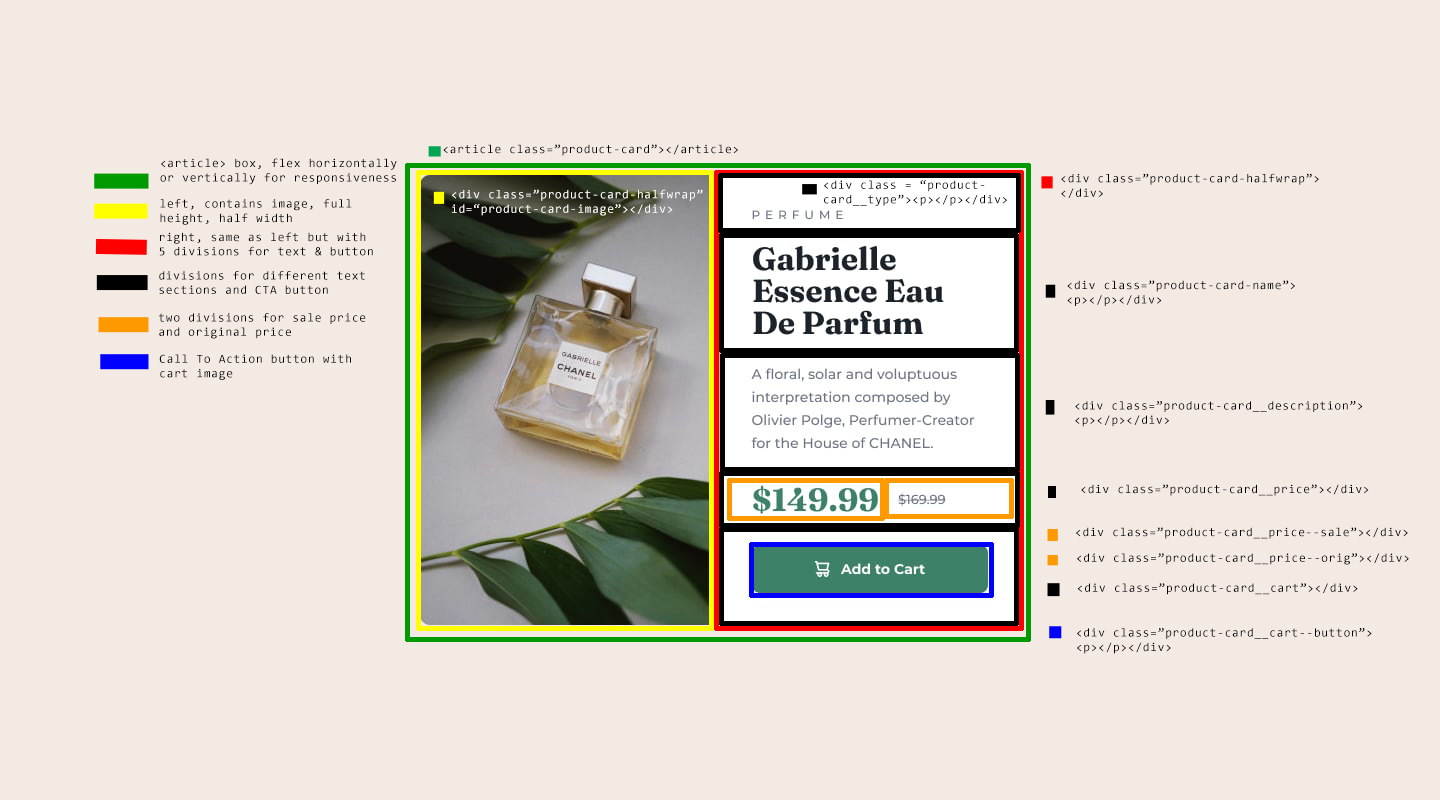
<style>
.page{position:relative;width:1440px;height:800px;background:#f3eae3}
.page>*{position:absolute;margin:0}
.t1{font:12px "Consolas";letter-spacing:0.07em;color:#000000}
.t2{font:12px "Consolas";letter-spacing:0.07em;color:#ffffff}
</style>
<div class="page">
<p class="t1" style="left:443px;top:144px;width:295px;height:12px">&lt;article class=”product-card”&gt;&lt;/article&gt;</p>
<p class="t1" style="left:160px;top:158px;width:237px;height:27px">&lt;article&gt; box, flex horizontally<br>or vertically for responsiveness</p>
<p class="t1" style="left:1061px;top:173px;width:258px;height:25px">&lt;div class=”product-card-halfwrap”&gt;<br>&lt;/div&gt;</p>
<p class="t1" style="left:824px;top:180px;width:183px;height:26px">&lt;div class = “product-<br>card__type”&gt;&lt;p&gt;&lt;/p&gt;&lt;/div&gt;</p>
<p class="t2" style="left:452px;top:189px;width:251px;height:27px">&lt;div class=”product-card-halfwrap”<br>id=“product-card-image”&gt;&lt;/div&gt;</p>
<p class="t1" style="left:160px;top:199px;width:192px;height:26px">left, contains image, full<br>height, half width</p>
<p class="t1" style="left:159px;top:232px;width:214px;height:24px">right, same as left but with<br>5 divisions for text &amp; button</p>
<p class="t1" style="left:159px;top:271px;width:206px;height:23px">divisions for different text<br>sections and CTA button</p>
<p class="t1" style="left:1067px;top:280px;width:228px;height:26px">&lt;div class=”product-card-name”&gt;<br>&lt;p&gt;&lt;/p&gt;&lt;/div&gt;</p>
<p class="t1" style="left:158px;top:313px;width:208px;height:26px">two divisions for sale price<br>and original price</p>
<p class="t1" style="left:159px;top:354px;width:192px;height:26px">Call To Action button with<br>cart image</p>
<p class="t1" style="left:1075px;top:401px;width:288px;height:26px">&lt;div class=”product-card__description”&gt;<br>&lt;p&gt;&lt;/p&gt;&lt;/div&gt;</p>
<p class="t1" style="left:1081px;top:484px;width:288px;height:12px">&lt;div class=”product-card__price”&gt;&lt;/div&gt;</p>
<p class="t1" style="left:1076px;top:527px;width:332px;height:12px">&lt;div class=”product-card__price--sale”&gt;&lt;/div&gt;</p>
<p class="t1" style="left:1077px;top:553px;width:332px;height:12px">&lt;div class=”product-card__price--orig”&gt;&lt;/div&gt;</p>
<p class="t1" style="left:1077px;top:583px;width:281px;height:12px">&lt;div class=”product-card__cart”&gt;&lt;/div&gt;</p>
<p class="t1" style="left:1077px;top:628px;width:295px;height:26px">&lt;div class=”product-card__cart--button”&gt;<br>&lt;p&gt;&lt;/p&gt;&lt;/div&gt;</p>
</div>
